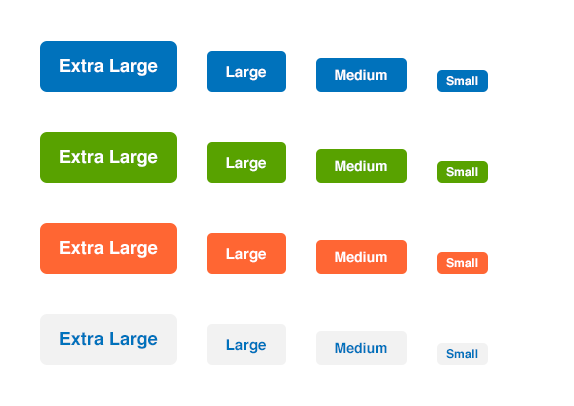
<style>
.page{position:relative;width:574px;height:406px;background:#ffffff}
.page>*{position:absolute;margin:0}
.t1{font:18px "Helvetica-Bold";color:#ffffff}
.t2{font:15px "Helvetica-Bold";color:#ffffff}
.t3{font:14px "Helvetica-Bold";color:#ffffff}
.t4{font:12px "Helvetica-Bold";color:#ffffff}
.t5{font:18px "Helvetica-Bold";color:#0072bc}
.t6{font:15px "Helvetica-Bold";color:#0072bc}
.t7{font:14px "Helvetica-Bold";color:#0072bc}
.t8{font:12px "Helvetica-Bold";color:#0072bc}
</style>
<div class="page">
<p class="t1" style="left:60px;top:59px;width:98px;height:17px">Extra Large</p>
<p class="t2" style="left:226px;top:66px;width:40px;height:15px">Large</p>
<p class="t3" style="left:335px;top:69px;width:52px;height:12px">Medium</p>
<p class="t4" style="left:446px;top:76px;width:32px;height:10px">Small</p>
<p class="t1" style="left:60px;top:150px;width:98px;height:17px">Extra Large</p>
<p class="t2" style="left:226px;top:157px;width:40px;height:15px">Large</p>
<p class="t3" style="left:335px;top:160px;width:52px;height:12px">Medium</p>
<p class="t4" style="left:446px;top:167px;width:32px;height:10px">Small</p>
<p class="t1" style="left:60px;top:241px;width:98px;height:17px">Extra Large</p>
<p class="t2" style="left:226px;top:248px;width:40px;height:15px">Large</p>
<p class="t3" style="left:335px;top:251px;width:52px;height:12px">Medium</p>
<p class="t4" style="left:446px;top:258px;width:32px;height:10px">Small</p>
<p class="t5" style="left:60px;top:332px;width:98px;height:17px">Extra Large</p>
<p class="t6" style="left:226px;top:339px;width:40px;height:15px">Large</p>
<p class="t7" style="left:335px;top:342px;width:52px;height:12px">Medium</p>
<p class="t8" style="left:446px;top:349px;width:32px;height:10px">Small</p>
</div>
